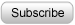
<style>
.page{position:relative;width:75px;height:25px}
.page>*{position:absolute;margin:0}
.t1{font:12px "ArialMT";color:#010101}
</style>
<div class="page">
<p class="t1" style="left:11px;top:8px;width:53px;height:10px">Subscribe</p>
</div>
